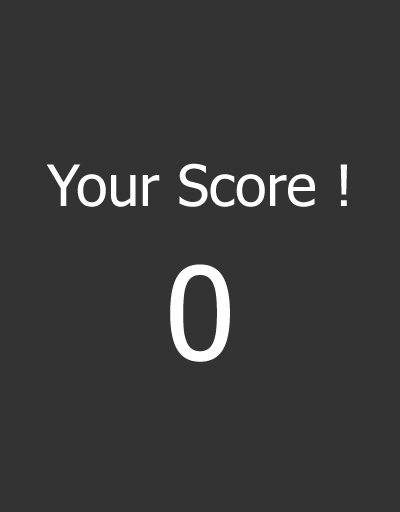
<style>
.page{position:relative;width:400px;height:512px;background:#333333}
.page>*{position:absolute;margin:0}
.t1{font:56.9px "Tahoma";color:#ffffff}
.t2{font:128px "Tahoma";color:#ffffff}
</style>
<div class="page">
<p class="t1" style="left:46px;top:163px;width:301px;height:199px;text-align:center">Your Score !<br><span class="t2">0</span></p>
</div>
